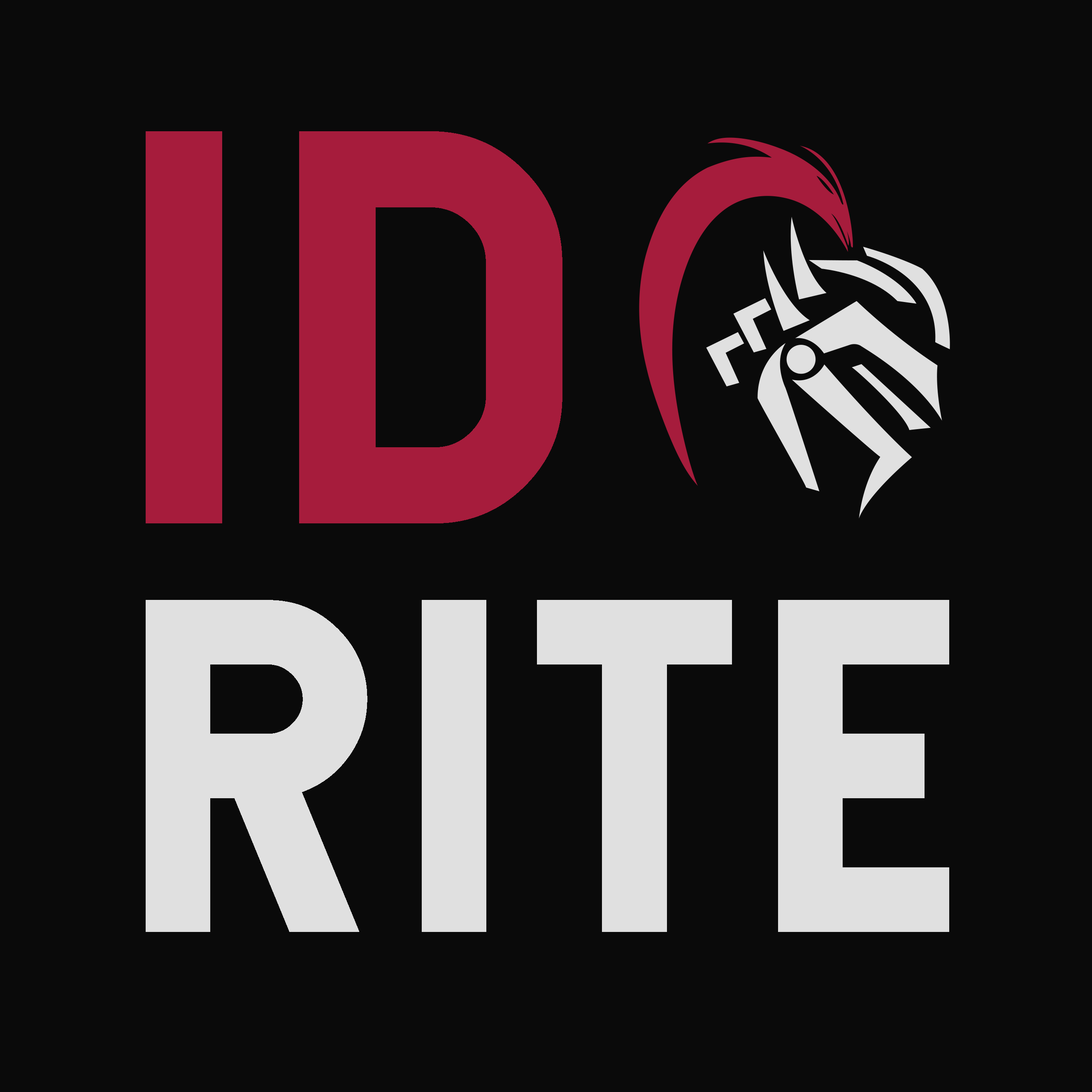
<style>
.page{position:relative;width:1092px;height:1092px;background:#0a0a0a}
.page>*{position:absolute;margin:0}
.t1{font:534.9px "Hansief";color:#a61c3c;text-transform:uppercase}
.t2{font:452.6px "Hansief";letter-spacing:0.04em;color:#e0e0e0;text-transform:uppercase}
</style>
<div class="page">
<p class="t1" style="left:299px;top:131px;width:263px;height:392px">d</p>
<p class="t2" style="left:146px;top:600px;width:803px;height:332px">rite</p>
</div>
